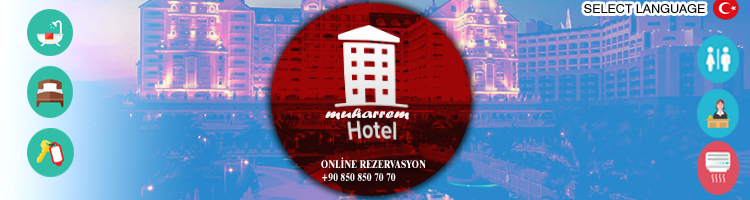
<style>
.page{position:relative;width:750px;height:200px}
.page>*{position:absolute;margin:0}
.t1{font:12px "Swiss721BT-Roman";color:#000000;scale:1.07 1}
.t2{font:14px "ForteMT";color:#fff0f0;scale:1.43 1}
.t3{font:11.4px "Dutch801BT-ExtraBold";color:#fefefe;scale:0.77 1}
</style>
<div class="page">
<p class="t1" style="left:584px;top:4px;width:121px;height:9px;opacity:0.97">SELECT LANGUAGE</p>
<p class="t2" style="left:325px;top:108px;width:84px;height:12px">muharrem</p>
<p class="t3" style="left:321px;top:157px;width:105px;height:24px">ONLİNE REZERVASYON <br>+90 850 850 70 70</p>
</div>
